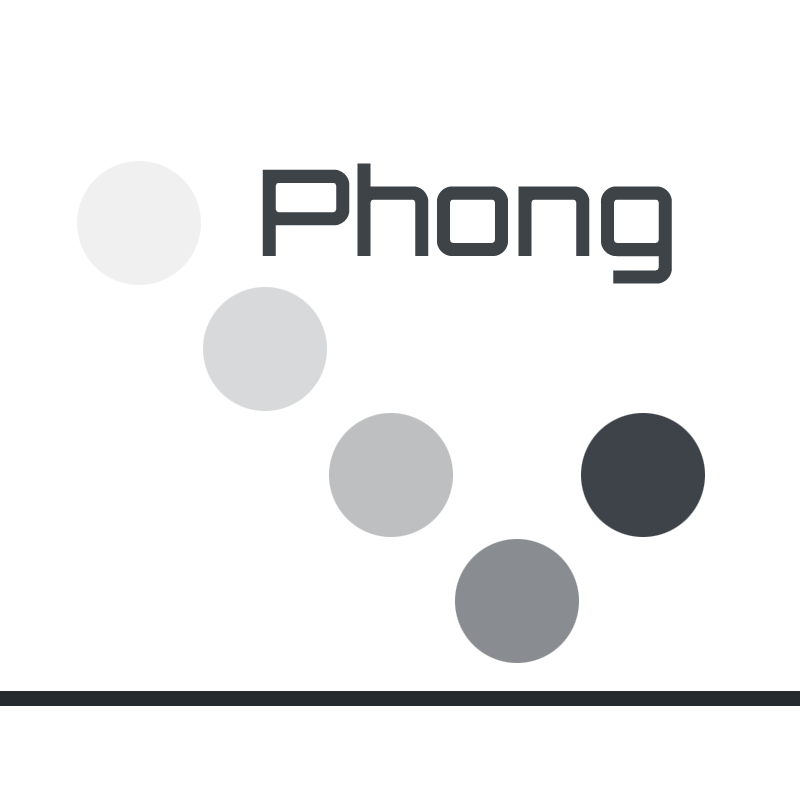
<style>
.page{position:relative;width:800px;height:800px;background:#ffffff}
.page>*{position:absolute;margin:0}
.t1{font:120px "Orbitron-Medium";color:#3e4348}
</style>
<div class="page">
<p class="t1" style="left:262px;top:163px;width:410px;height:121px">Phong</p>
</div>
